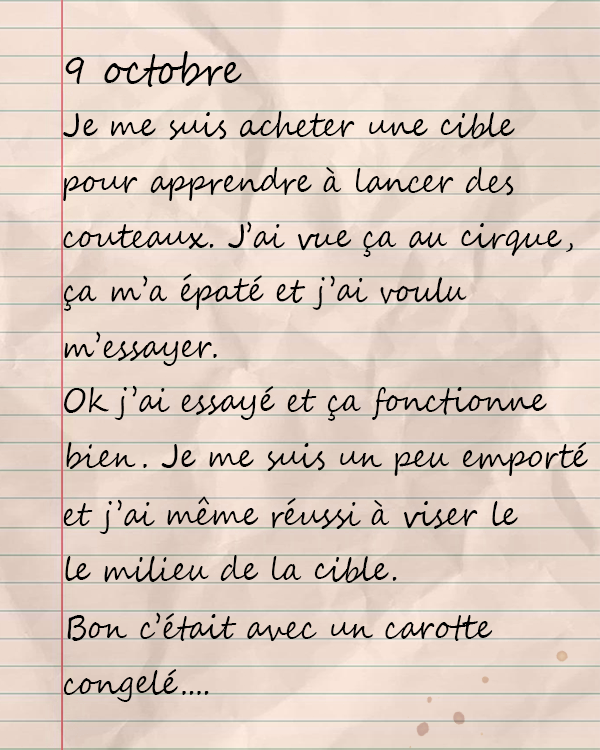
<style>
.page{position:relative;width:600px;height:750px}
.page>*{position:absolute;margin:0}
.t1{font:41.8px "SegoeScript";color:#000000;scale:0.9 1}
.t2{font:33.3px "SegoeScript";color:#000000;scale:0.9 1}
</style>
<div class="page">
<p class="t1" style="left:65px;top:51px;width:177px;height:36px">9 octobre</p>
<p class="t2" style="left:63px;top:111px;width:452px;height:29px">Je me suis acheter une cible</p>
<p class="t2" style="left:63px;top:167px;width:451px;height:34px">pour apprendre à lancer des</p>
<p class="t2" style="left:63px;top:221px;width:510px;height:36px">couteaux. J’ai vue ça au cirque,</p>
<p class="t2" style="left:64px;top:273px;width:403px;height:38px">ça m’a épaté et j’ai voulu</p>
<p class="t2" style="left:64px;top:331px;width:153px;height:35px">m’essayer.</p>
<p class="t2" style="left:64px;top:385px;width:483px;height:36px">Ok j’ai essayé et ça fonctionne bien.</p>
<p class="t2" style="left:66px;top:442px;width:522px;height:34px">bien. Je me suis un peu emporté</p>
<p class="t2" style="left:63px;top:496px;width:455px;height:38px">et j’ai même réussi à viser le</p>
<p class="t2" style="left:65px;top:555px;width:332px;height:28px">le milieu de la cible.</p>
<p class="t2" style="left:67px;top:612px;width:426px;height:30px">Bon c’était avec un carotte</p>
<p class="t2" style="left:63px;top:669px;width:146px;height:33px">congelé....</p>
</div>
